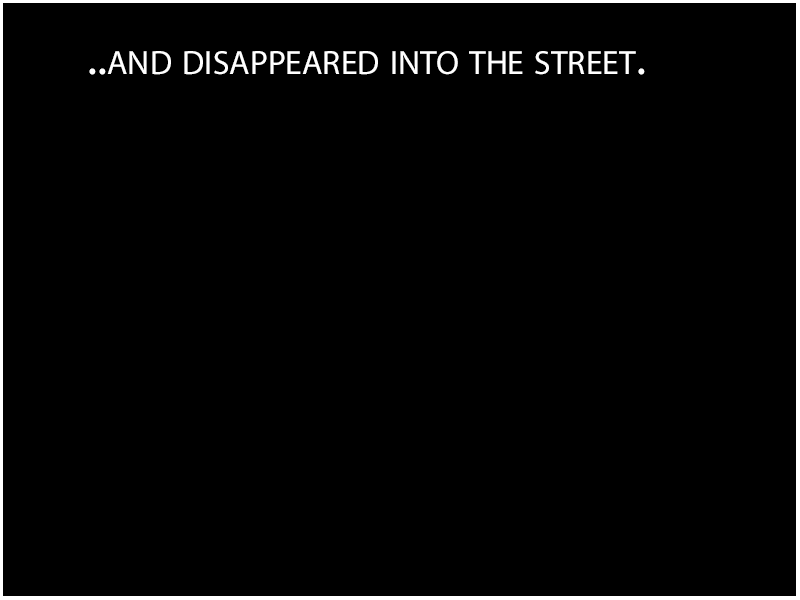
<style>
.page{position:relative;width:800px;height:600px;background:#000000}
.page>*{position:absolute;margin:0}
.t1{font:48px "MyriadPro-Regular";color:#ffffff;font-variant:small-caps}
</style>
<div class="page">
<p class="t1" style="left:89px;top:51px;width:556px;height:24px">..and disappeared into the street.</p>
</div>
